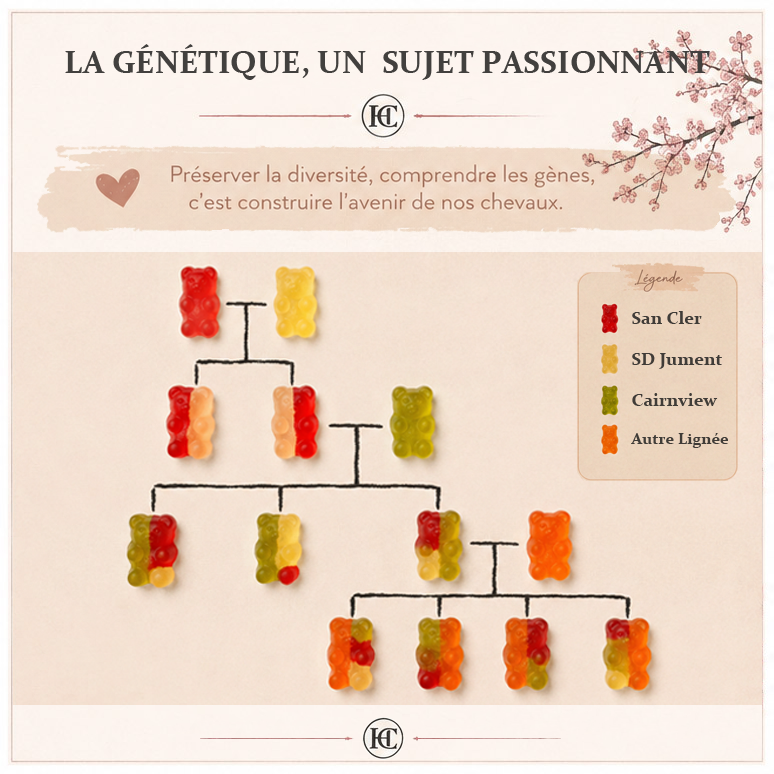
<style>
.page{position:relative;width:774px;height:774px}
.page>*{position:absolute;margin:0}
.t1{font:32px "Constantia-Bold";color:#42403e}
.t2{font:18px "Constantia-Bold";color:#42403e}
.t3{font:16px "Constantia-Bold";color:#42403e}
</style>
<div class="page">
<p class="t1" style="left:65px;top:44px;width:645px;height:36px">LA GÉNÉTIQUE, UN  SUJET PASSIONNANT</p>
<p class="t2" style="left:632px;top:311px;width:70px;height:13px">San Cler</p>
<p class="t2" style="left:632px;top:353px;width:90px;height:16px">SD Jument</p>
<p class="t2" style="left:632px;top:393px;width:86px;height:13px">Cairnview</p>
<p class="t3" style="left:631px;top:433px;width:97px;height:15px">Autre Lignée</p>
</div>
